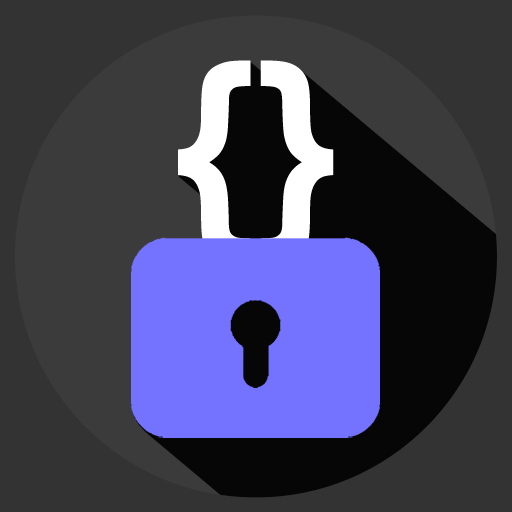
<style>
.page{position:relative;width:512px;height:512px;background:#333333}
.page>*{position:absolute;margin:0}
.t1{font:216.6px "Arial-BoldMT";color:#ffffff}
</style>
<div class="page">
<p class="t1" style="left:178px;top:60px;width:156px;height:204px">{}</p>
</div>
